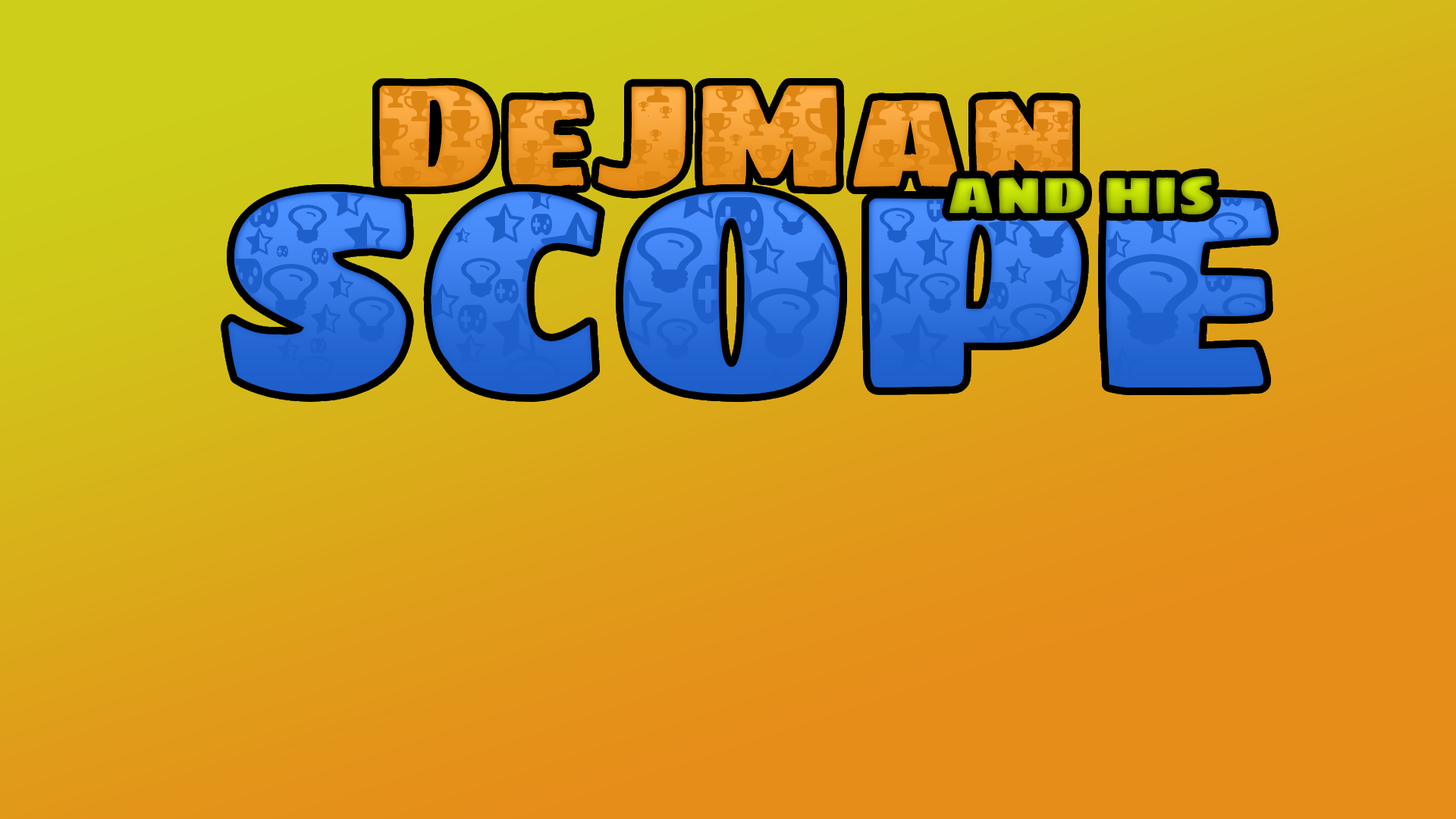
<style>
.page{position:relative;width:1456px;height:819px}
.page>*{position:absolute;margin:0}
.t1{font:150.1px "SigmarOne-Regular";color:#e78f1c}
.t2{font:60.7px "SigmarOne-Regular"}
.t3{font:282.1px "SigmarOne-Regular"}
</style>
<div class="page">
<p class="t1" style="left:379px;top:85px;width:694px;height:106px">DeJMan</p>
<p class="t2" style="left:949px;top:176px;width:264px;height:39px">and his</p>
<p class="t3" style="left:227px;top:191px;width:1045px;height:203px">SCOPE</p>
</div>
